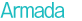
<style>
.page{position:relative;width:82px;height:21px;background:#ffffff}
.page>*{position:absolute;margin:0}
.t1{font:20px "GothicMB101Pro-Regular";letter-spacing:-0.06em;color:#1dbcc0;scale:0.9 1}
</style>
<div class="page">
<p class="t1" style="left:0px;top:2px;width:65px;height:16px">Armada</p>
</div>
